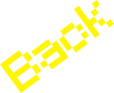
<style>
.page{position:relative;width:114px;height:93px;background:#ffffff}
.page>*{position:absolute;margin:0}
.t1{font:47.4px "Minecraft";color:#fef602}
</style>
<div class="page">
<p class="t1" style="left:0px;top:0px;width:114px;height:93px;rotate:-36deg">Back</p>
</div>
